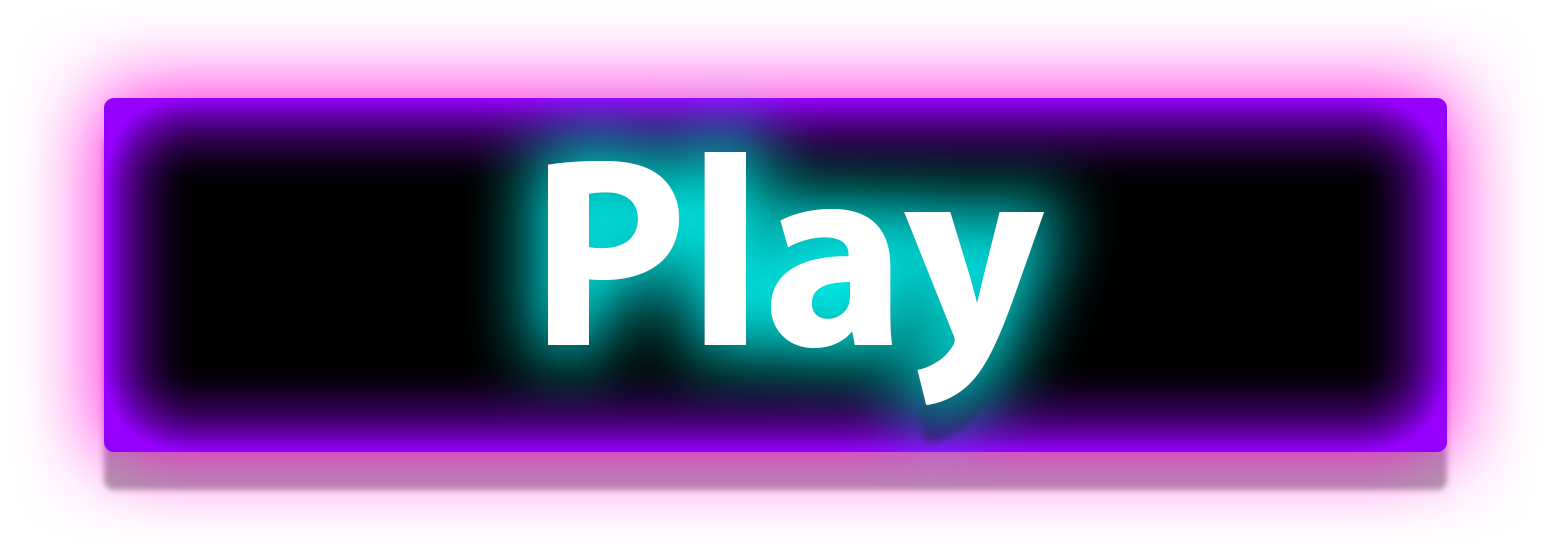
<style>
.page{position:relative;width:1550px;height:550px}
.page>*{position:absolute;margin:0}
.t1{font:271.9px "MyriadPro-Bold";color:#ffffff}
</style>
<div class="page">
<p class="t1" style="left:548px;top:152px;width:496px;height:254px">Play</p>
</div>
